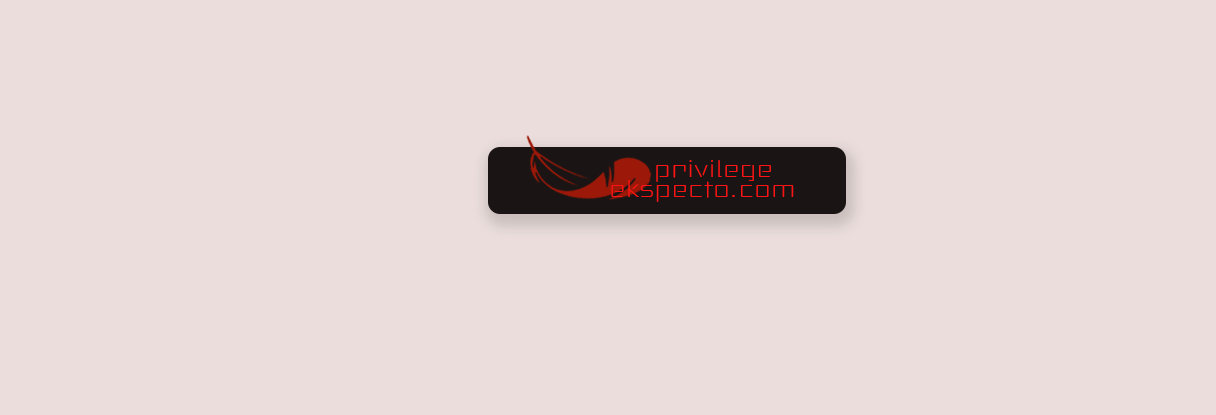
<style>
.page{position:relative;width:1216px;height:415px;background:#eadddb}
.page>*{position:absolute;margin:0}
.t1{font:30.1px/20px "Anoxic-Light";color:#fe1414}
</style>
<div class="page">
<p class="t1" style="left:611px;top:160px;width:183px;height:42px;text-align:center">privilege <br>ekspecto.com</p>
</div>
